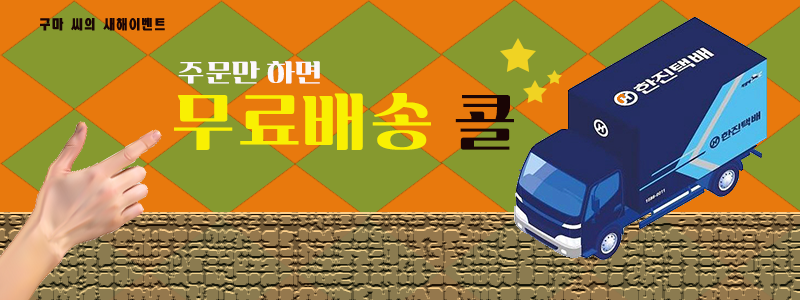
<style>
.page{position:relative;width:800px;height:300px;background:#86992f}
.page>*{position:absolute;margin:0}
.t1{font:14px "JCHEadA";color:#1a0505}
.t2{font:24px "twaysky";color:#fcf7fa;scale:1.05 1}
.t3{font:60.8px "twaysky";color:#f9f002}
.t4{font:60.8px "twaysky";color:#1a0505}
</style>
<div class="page">
<p class="t1" style="left:40px;top:17px;width:125px;height:14px">구마 씨의 새해이벤트</p>
<p class="t2" style="left:178px;top:61px;width:142px;height:23px">주문만 하면</p>
<p class="t3" style="left:174px;top:93px;width:340px;height:57px">무료배송<span class="t4"> 콜</span></p>
</div>
